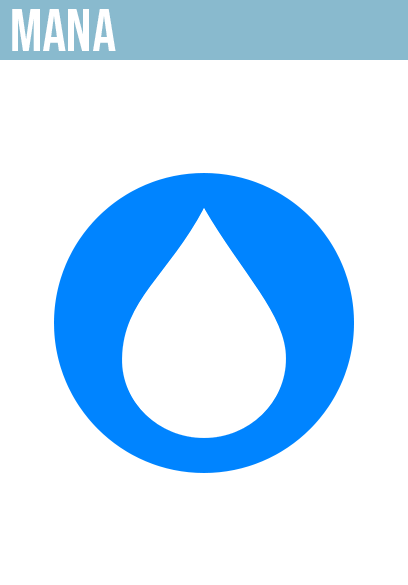
<style>
.page{position:relative;width:408px;height:585px;background:#ffffff}
.page>*{position:absolute;margin:0}
.t1{font:60px "BebasNeue-Regular";color:#ffffff}
</style>
<div class="page">
<p class="t1" style="left:12px;top:9px;width:104px;height:42px">mana</p>
</div>
